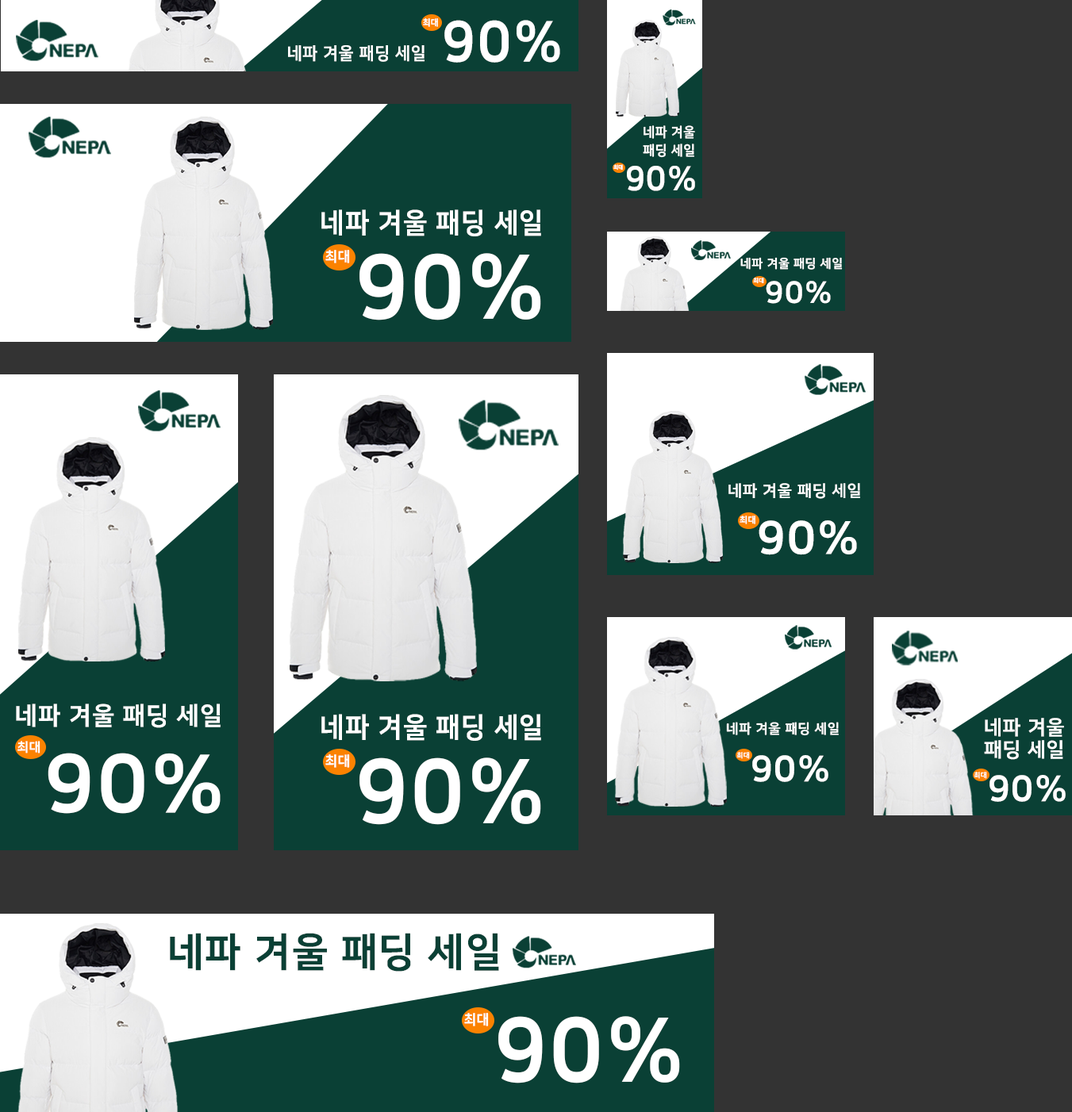
<style>
.page{position:relative;width:1072px;height:1112px;background:#333333}
.page>*{position:absolute;margin:0}
.t1{font:8.9px "NanumSquareEB";letter-spacing:0.04em;color:#ffffff;scale:0.96 1}
.t2{font:56.5px "NanumSquareEB";letter-spacing:0.04em;color:#ffffff;scale:0.96 1}
.t3{font:17.2px "NanumSquareEB";letter-spacing:0.04em;color:#ffffff;scale:0.96 1}
.t4{font:13.5px/17.8px "NanumSquareEB";letter-spacing:0.04em;color:#ffffff;scale:0.96 1}
.t5{font:5.3px "NanumSquareEB";letter-spacing:0.04em;color:#ffffff;scale:0.96 1}
.t6{font:33.7px "NanumSquareEB";letter-spacing:0.04em;color:#ffffff;scale:0.96 1}
.t7{font:27.8px "NanumSquareEB";letter-spacing:0.04em;color:#ffffff;scale:0.96 1}
.t8{font:14px "NanumSquareEB";letter-spacing:0.04em;color:#ffffff;scale:0.96 1}
.t9{font:89.1px "NanumSquareEB";letter-spacing:0.04em;color:#ffffff;scale:0.96 1}
.t10{font:12.2px "NanumSquareEB";letter-spacing:0.04em;color:#ffffff}
.t11{font:5.8px "NanumSquareEB";letter-spacing:0.04em;color:#ffffff}
.t12{font:30px "NanumSquareEB";letter-spacing:0.04em;color:#ffffff}
.t13{font:15.9px "NanumSquareEB";letter-spacing:0.04em;color:#ffffff}
.t14{font:8.8px "NanumSquareEB";letter-spacing:0.04em;color:#ffffff}
.t15{font:45.7px "NanumSquareEB";letter-spacing:0.04em;color:#ffffff}
.t16{font:24.6px "NanumSquareEB";letter-spacing:0.04em;color:#ffffff}
.t17{font:13.5px "NanumSquareEB";letter-spacing:0.04em;color:#ffffff}
.t18{font:19.9px/22.3px "NanumSquareEB";letter-spacing:0.04em;color:#ffffff}
.t19{font:12.7px "NanumSquareEB";letter-spacing:0.04em;color:#ffffff}
.t20{font:80.6px "NanumSquareEB";letter-spacing:0.04em;color:#ffffff}
.t21{font:6.9px "NanumSquareEB";letter-spacing:0.04em;color:#ffffff}
.t22{font:35.7px "NanumSquareEB";letter-spacing:0.04em;color:#ffffff}
.t23{font:39.7px "NanumSquareEB";letter-spacing:0.04em;color:#0a4035}
</style>
<div class="page">
<p class="t1" style="left:423px;top:18px;width:15px;height:9px">최대</p>
<p class="t2" style="left:444px;top:20px;width:116px;height:43px">90%</p>
<p class="t3" style="left:288px;top:45px;width:136px;height:17px">네파 겨울 패딩 세일</p>
<p class="t4" style="left:643px;top:125px;width:52px;height:33px;text-align:right">네파 겨울<br>패딩 세일</p>
<p class="t5" style="left:613px;top:164px;width:10px;height:7px">최대</p>
<p class="t6" style="left:627px;top:166px;width:68px;height:25px">90%</p>
<p class="t7" style="left:321px;top:209px;width:220px;height:27px">네파 겨울 패딩 세일</p>
<p class="t8" style="left:325px;top:250px;width:25px;height:13px">최대</p>
<p class="t9" style="left:359px;top:253px;width:182px;height:68px">90%</p>
<p class="t10" style="left:740px;top:257px;width:103px;height:13px">네파 겨울 패딩 세일</p>
<p class="t11" style="left:753px;top:278px;width:11px;height:6px">최대</p>
<p class="t12" style="left:766px;top:281px;width:65px;height:23px">90%</p>
<p class="t13" style="left:728px;top:483px;width:132px;height:16px">네파 겨울 패딩 세일</p>
<p class="t14" style="left:739px;top:516px;width:16px;height:8px">최대</p>
<p class="t15" style="left:759px;top:520px;width:98px;height:35px">90%</p>
<p class="t16" style="left:16px;top:704px;width:205px;height:24px">네파 겨울 패딩 세일</p>
<p class="t7" style="left:321px;top:714px;width:220px;height:27px">네파 겨울 패딩 세일</p>
<p class="t17" style="left:726px;top:722px;width:113px;height:14px">네파 겨울 패딩 세일</p>
<p class="t18" style="left:984px;top:718px;width:80px;height:42px;text-align:right">네파 겨울<br>패딩 세일</p>
<p class="t19" style="left:17px;top:741px;width:23px;height:13px">최대</p>
<p class="t20" style="left:48px;top:753px;width:173px;height:61px">90%</p>
<p class="t8" style="left:325px;top:755px;width:25px;height:13px">최대</p>
<p class="t9" style="left:359px;top:758px;width:182px;height:67px">90%</p>
<p class="t21" style="left:736px;top:752px;width:14px;height:7px">최대</p>
<p class="t22" style="left:752px;top:755px;width:76px;height:27px">90%</p>
<p class="t21" style="left:974px;top:772px;width:13px;height:7px">최대</p>
<p class="t22" style="left:989px;top:775px;width:77px;height:27px">90%</p>
<p class="t23" style="left:170px;top:933px;width:329px;height:39px">네파 겨울 패딩 세일</p>
<p class="t8" style="left:464px;top:1013px;width:25px;height:14px">최대</p>
<p class="t9" style="left:498px;top:1016px;width:182px;height:68px">90%</p>
</div>
